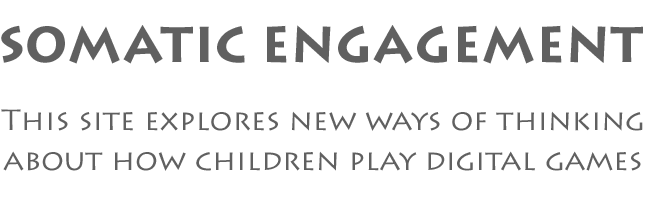
<style>
.page{position:relative;width:645px;height:223px;background:#ffffff}
.page>*{position:absolute;margin:0}
.t1{font:50px "Lithos-Bold";color:#606060}
.t2{font:29.5px/40.4px "LithosPro-Regular";color:#606060}
</style>
<div class="page">
<p class="t1" style="left:1px;top:25px;width:642px;height:39px">somatic engagement</p>
<p class="t2" style="left:1px;top:109px;width:642px;height:62px;text-align:center">This site explores new ways of thinking<br>about how children play digital games</p>
</div>
